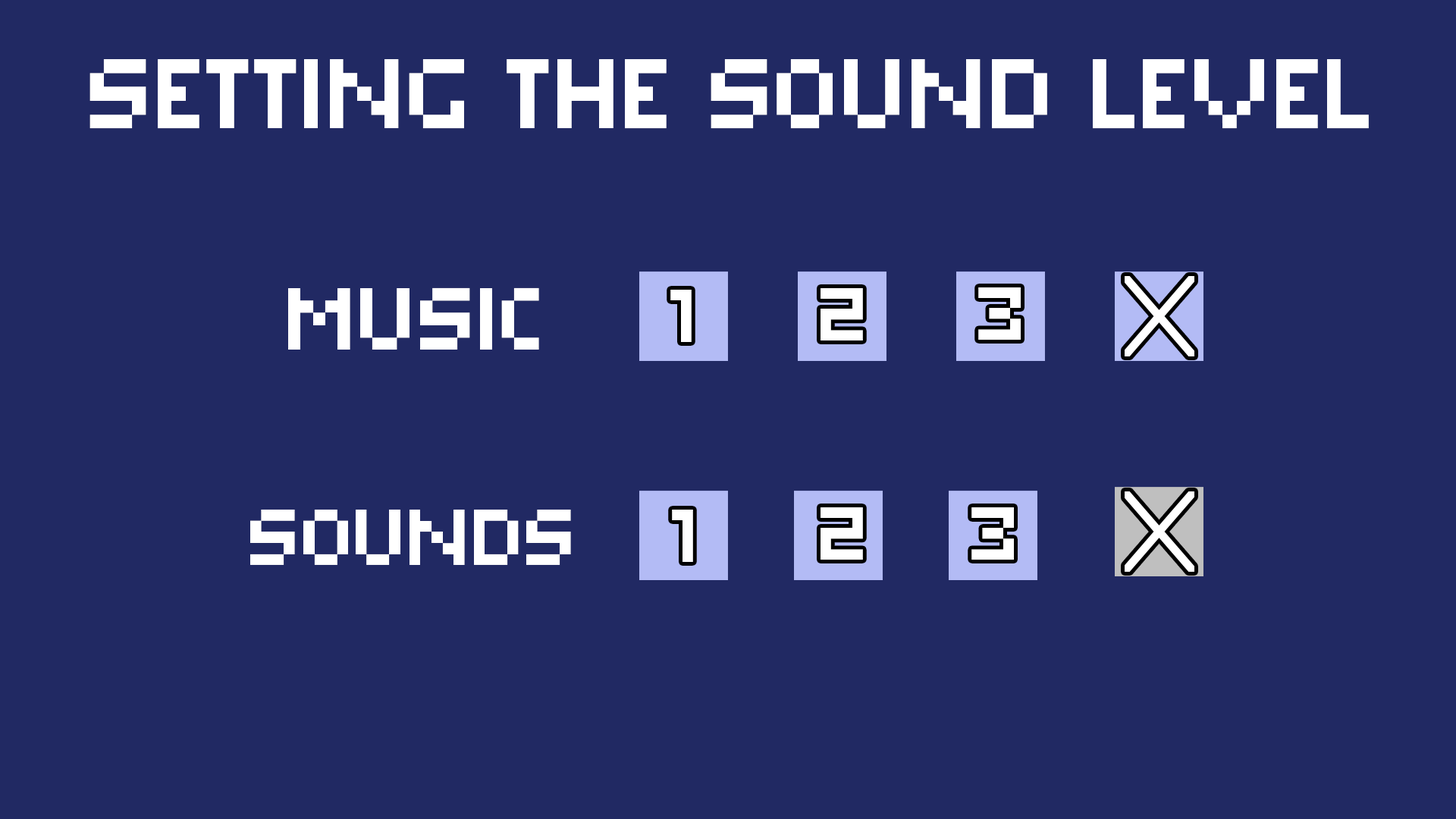
<style>
.page{position:relative;width:1456px;height:819px;background:#212963}
.page>*{position:absolute;margin:0}
.t1{font:98.6px "PixarOne";color:#ffffff}
.t2{font:87.7px "PixarOne";color:#ffffff}
.t3{font:75.2px "PixarOne";color:#ffffff}
.t4{font:78.6px "PixarOne";color:#ffffff}
</style>
<div class="page">
<p class="t1" style="left:89px;top:59px;width:1280px;height:70px">setting the sound level</p>
<p class="t2" style="left:288px;top:287px;width:251px;height:63px">Music</p>
<p class="t3" style="left:670px;top:290px;width:22px;height:52px">1</p>
<p class="t3" style="left:821px;top:288px;width:42px;height:52px">2</p>
<p class="t3" style="left:978px;top:287px;width:43px;height:53px">3</p>
<p class="t4" style="left:250px;top:510px;width:321px;height:55px">sounds</p>
<p class="t3" style="left:672px;top:510px;width:21px;height:52px">1</p>
<p class="t3" style="left:821px;top:507px;width:42px;height:53px">2</p>
<p class="t3" style="left:971px;top:507px;width:43px;height:53px">3</p>
</div>
